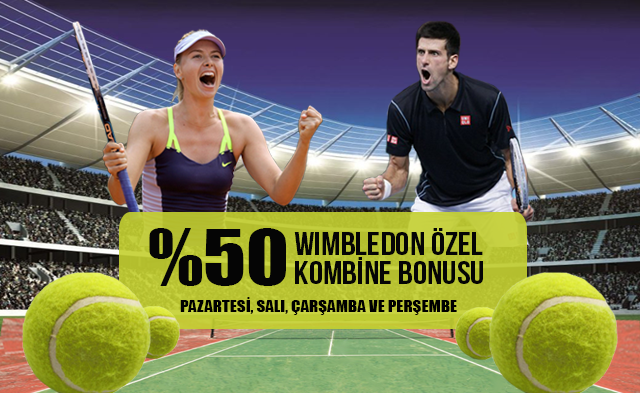
<style>
.page{position:relative;width:640px;height:393px}
.page>*{position:absolute;margin:0}
.t1{font:71.2px "Impact";color:#050505;text-transform:uppercase;scale:1.12 1}
.t2{font:32px/29px "BebasNeue";color:#050505;text-transform:uppercase;scale:1.12 1}
.t3{font:15.1px "Impact";color:#000000;text-transform:uppercase;scale:1.12 1}
</style>
<div class="page">
<p class="t1" style="left:149px;top:228px;width:137px;height:58px">%50</p>
<p class="t2" style="left:294px;top:228px;width:189px;height:56px">wimbledon Özel<br>kombİNE BONUSU</p>
<p class="t3" style="left:180px;top:297px;width:277px;height:18px">pazarTesİ, SALI, ÇARŞAMBA VE PERŞEMBE</p>
</div>
